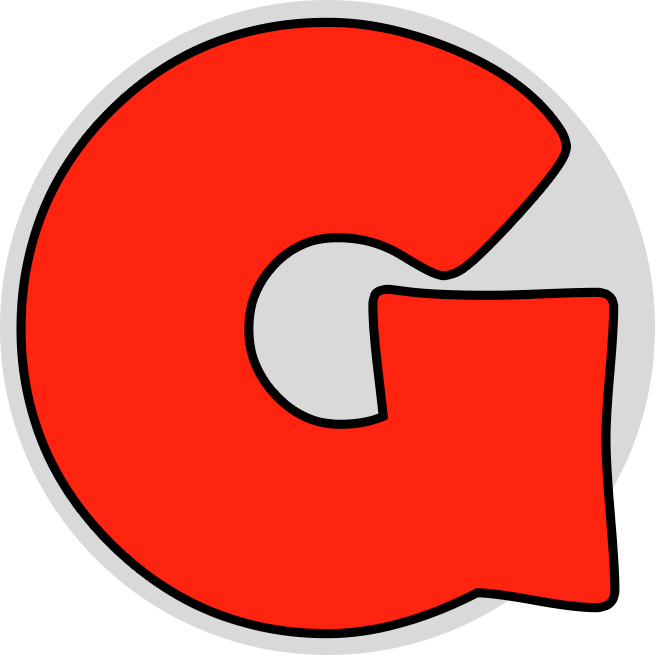
<style>
.page{position:relative;width:655px;height:655px;background:#ff2410}
.page>*{position:absolute;margin:0}
.t1{font:833.3px "BerlinSansFB-Bold";letter-spacing:0.04em;color:#ff2410}
</style>
<div class="page">
<p class="t1" style="left:25px;top:27px;width:586px;height:602px">G</p>
</div>
